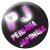
<style>
.page{position:relative;width:50px;height:50px;background:#ffffff}
.page>*{position:absolute;margin:0}
.t1{font:21.4px "28-Days-Later-Regular";scale:1.27 1}
.t2{font:8px "28-Days-Later-Regular"}
</style>
<div class="page">
<p class="t1" style="left:4px;top:5px;width:28px;height:25px;rotate:-28deg">PJ</p>
<p class="t2" style="left:10px;top:21px;width:37px;height:26px;rotate:-35deg">PEruana<br> japonesa</p>
</div>
